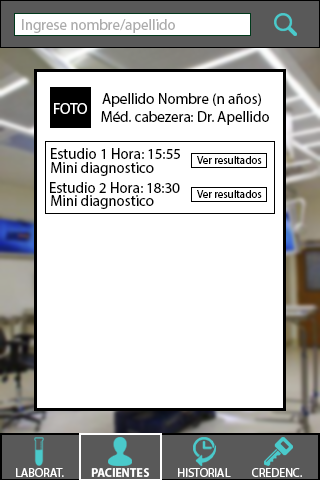
<style>
.page{position:relative;width:320px;height:480px;background:#ffffff}
.page>*{position:absolute;margin:0}
.t1{font:15px "MyriadPro-Regular";color:#acacac}
.t2{font:15px "MyriadPro-Regular";color:#000000}
.t3{font:15px "MyriadPro-Regular";color:#ffffff}
.t4{font:11px "MyriadPro-Regular";color:#000000}
.t5{font:12px "MyriadPro-Regular";color:#ffffff}
.t6{font:12px "MyriadPro-Bold";color:#ffffff}
.t7{font:12px "MyriadPro-Regular";color:#fefefe}
</style>
<div class="page">
<p class="t1" style="left:22px;top:19px;width:153px;height:14px">Ingrese nombre/apellido</p>
<p class="t2" style="left:102px;top:93px;width:159px;height:14px">Apellido Nombre (n años)</p>
<p class="t3" style="left:54px;top:103px;width:33px;height:11px">FOTO</p>
<p class="t2" style="left:101px;top:111px;width:168px;height:14px">Méd. cabezera: Dr. Apellido</p>
<p class="t2" style="left:51px;top:148px;width:129px;height:11px">Estudio 1 Hora: 15:55</p>
<p class="t4" style="left:197px;top:156px;width:65px;height:8px">Ver resultados</p>
<p class="t2" style="left:51px;top:162px;width:103px;height:14px">Mini diagnostico</p>
<p class="t2" style="left:50px;top:182px;width:130px;height:11px">Estudio 2 Hora: 18:30</p>
<p class="t2" style="left:51px;top:195px;width:103px;height:14px">Mini diagnostico</p>
<p class="t4" style="left:197px;top:190px;width:65px;height:8px">Ver resultados</p>
<p class="t5" style="left:16px;top:468px;width:48px;height:9px">LABORAT.</p>
<p class="t6" style="left:91px;top:468px;width:59px;height:9px">PACIENTES</p>
<p class="t7" style="left:178px;top:468px;width:53px;height:9px">HISTORIAL</p>
<p class="t5" style="left:252px;top:468px;width:50px;height:9px">CREDENC.</p>
</div>
